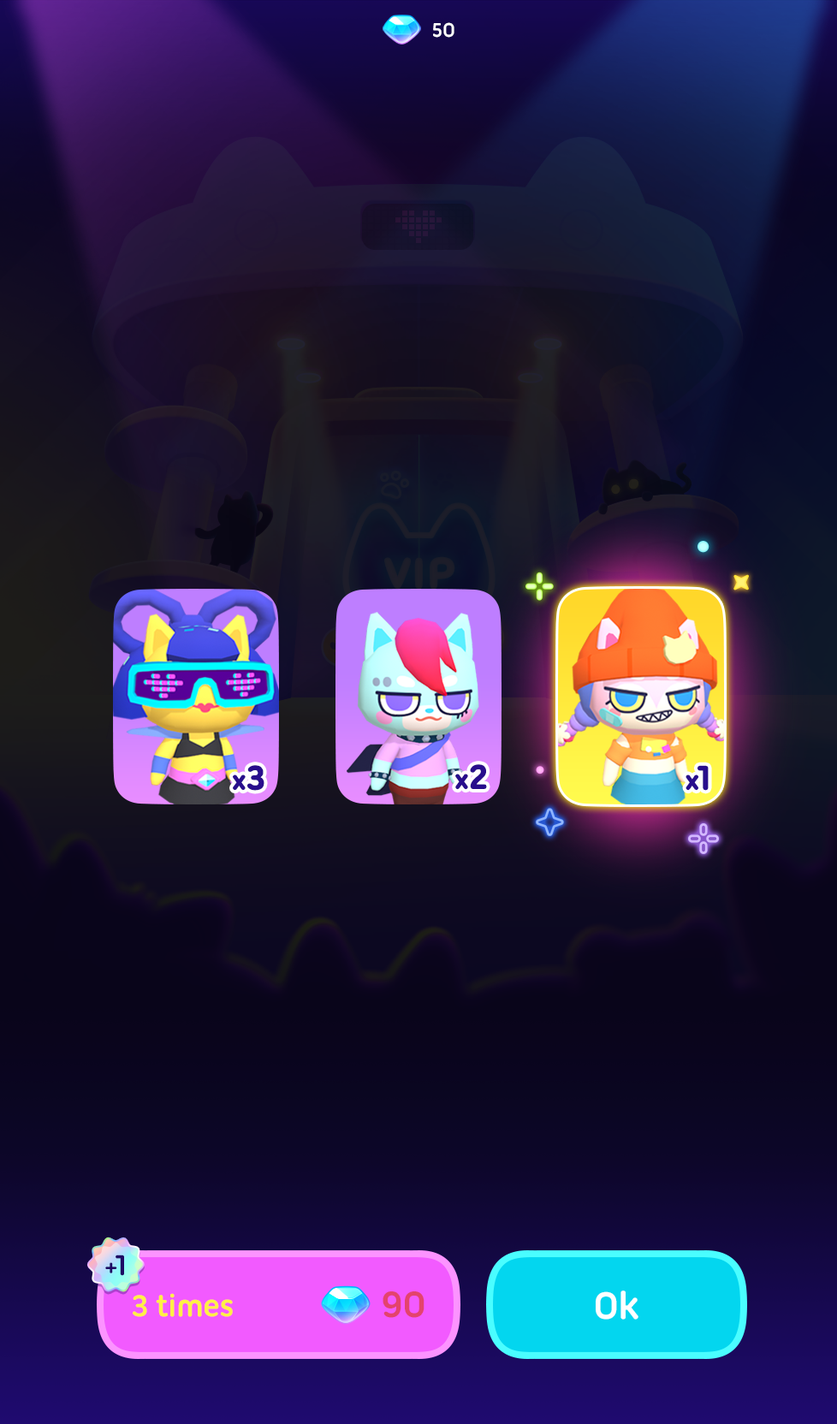
<style>
.page{position:relative;width:837px;height:1424px}
.page>*{position:absolute;margin:0}
.t1{font:21.4px "UbuntuTitling-Bold";letter-spacing:-0.025em;color:#ffffff}
.t2{font:27.4px "UbuntuTitling-Bold";letter-spacing:-0.025em;color:#280e8c;font-weight:bold}
.t3{font:36px "UbuntuTitling-Bold";letter-spacing:-0.025em;color:#280e8c;font-weight:bold}
.t4{font:25px "UbuntuTitling-Bold";letter-spacing:-0.025em;color:#1d0a64}
.t5{font:31.2px "UbuntuTitling-Bold";letter-spacing:-0.025em;color:#1d0a64}
.t6{font:32.5px "UbuntuTitling-Bold";letter-spacing:-0.025em;color:#fff045}
.t7{font:39.4px "UbuntuTitling-Bold";letter-spacing:-0.025em;color:#e4436d}
.t8{font:41.1px "UbuntuTitling-Bold";letter-spacing:-0.025em;color:#ffffff}
</style>
<div class="page">
<p class="t1" style="left:433px;top:22px;width:22px;height:16px">50</p>
<p class="t2" style="left:233px;top:765px;width:32px;height:26px">x<span class="t3">3</span></p>
<p class="t2" style="left:455px;top:764px;width:32px;height:26px">x<span class="t3">2</span></p>
<p class="t2" style="left:686px;top:765px;width:23px;height:26px">x<span class="t3">1</span></p>
<p class="t4" style="left:105px;top:1255px;width:19px;height:21px">+<span class="t5">1</span></p>
<p class="t6" style="left:133px;top:1293px;width:100px;height:24px">3 times</p>
<p class="t7" style="left:383px;top:1292px;width:42px;height:26px">90</p>
<p class="t8" style="left:596px;top:1291px;width:43px;height:29px">Ok</p>
</div>
